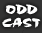
<style>
.page{position:relative;width:42px;height:33px}
.page>*{position:absolute;margin:0}
.t1{font:8.9px "Yes:Union";color:#fefefe}
.t2{font:8.9px "Yes:Union";color:#fdfefe}
</style>
<div class="page">
<p class="t1" style="left:5px;top:4px;width:33px;height:11px">ODD</p>
<p class="t2" style="left:2px;top:17px;width:39px;height:11px">CAST</p>
</div>
